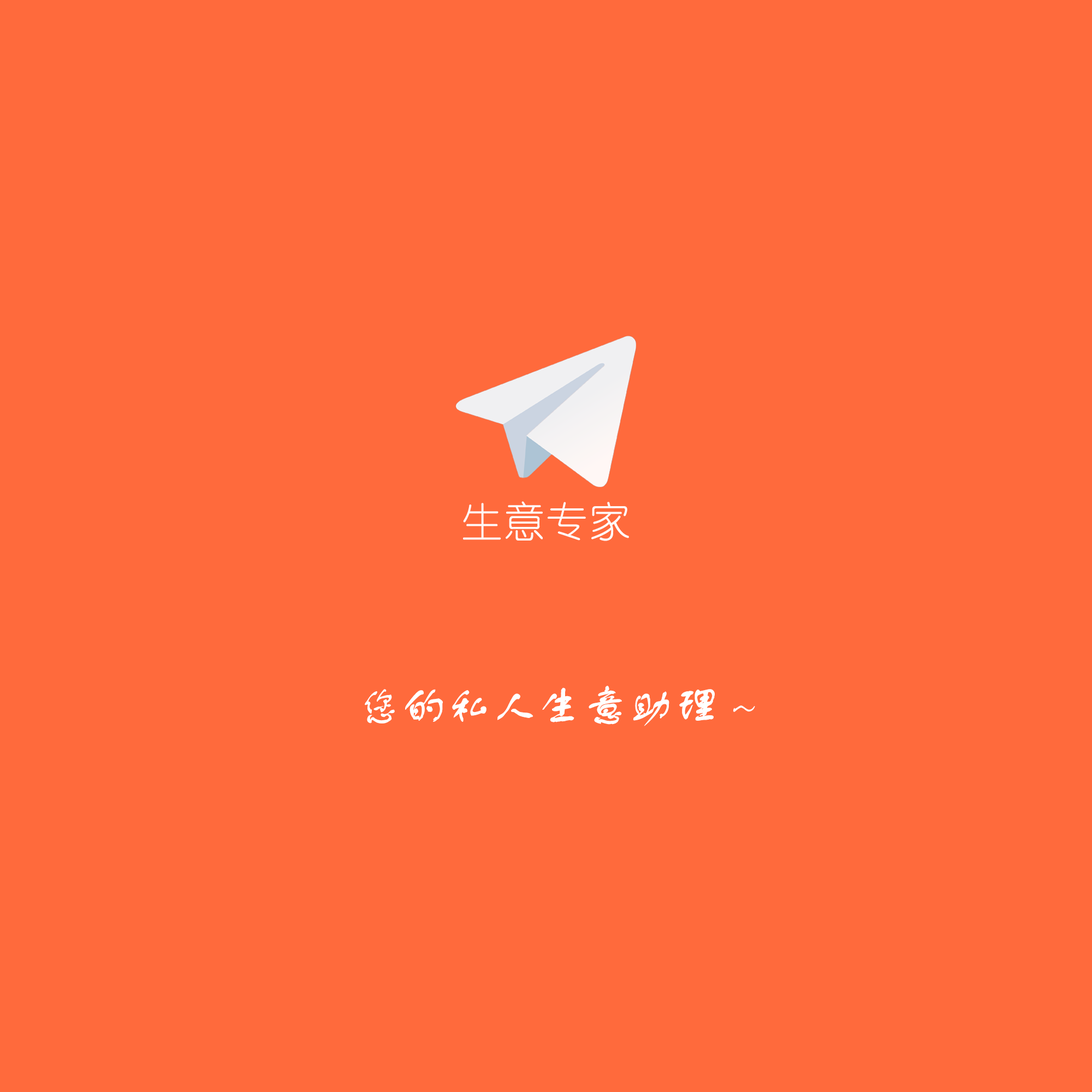
<style>
.page{position:relative;width:1092px;height:1092px;background:#ff6a3c}
.page>*{position:absolute;margin:0}
.t1{font:40.9px "YouYuan";letter-spacing:0.04em;color:#ffffff}
.t2{font:43.7px "FZSTK--GBK1-0";letter-spacing:0.04em;color:#ffffff}
</style>
<div class="page">
<p class="t1" style="left:463px;top:501px;width:166px;height:40px;opacity:0.95">生意专家</p>
<p class="t2" style="left:365px;top:686px;width:390px;height:40px">您的私人生意助理~</p>
</div>
